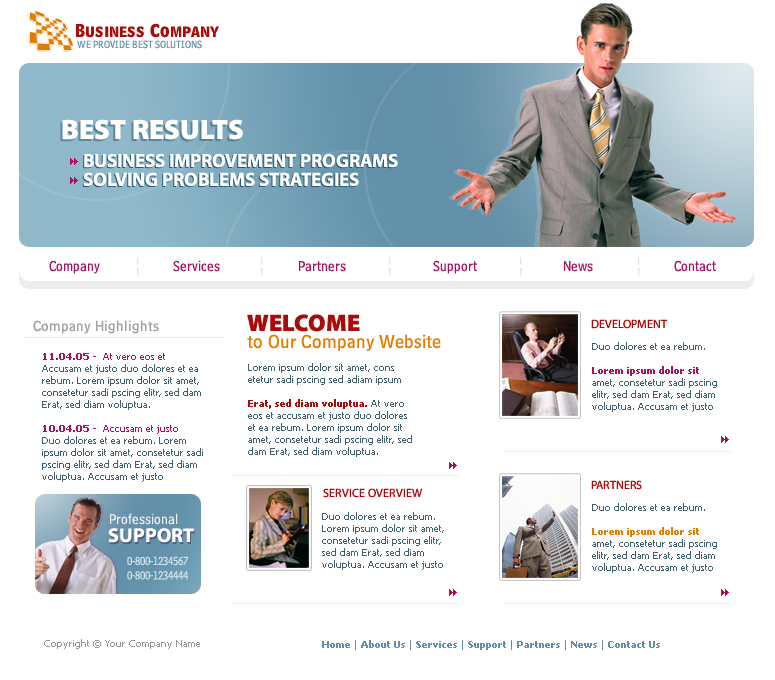
<style>
.page{position:relative;width:775px;height:680px;background:#ffffff}
.page>*{position:absolute;margin:0}
.t1{font:15px "BellCentennialBT-BoldListing";color:#a90b0a}
.t2{font:11px "BellCentennialBT-Address";color:#6290a8}
.t3{font:28px "MyriadPro-Black";color:#ffffff;text-transform:uppercase}
.t4{font:19px/18.8px "MyriadPro-Bold";color:#ffffff;text-transform:uppercase}
.t5{font:15px "BellCentennialBT-Address";color:#a61260}
.t6{font:19px/16.8px "BellCentennialBT-SubCaption";color:#e27c00}
.t7{font:24px/16.8px "MyriadPro-Black";color:#a90b0a;text-transform:uppercase}
.t8{font:15px "BellCentennialBT-SubCaption";color:#a1a1a1}
.t9{font:12px "MyriadPro-Regular";color:#a90b0a;text-transform:uppercase}
.t10{font:10px "Tahoma";color:#406070}
.t11{font:10px "Tahoma-Bold";color:#a61260}
.t12{font:10px "Tahoma";color:#a61260}
.t13{font:10px "Tahoma-Bold";color:#a90b0a}
.t14{font:10px "Tahoma-Bold";color:#e27c00}
.t15{font:15px "BellCentennialBT-Address";color:#ececec}
.t16{font:20px "MyriadPro-Bold";color:#ffffff;text-transform:uppercase}
.t17{font:12px "BellCentennialBT-Address";color:#d2e7f0}
.t18{font:10px "Tahoma";color:#949494}
.t19{font:10px "Tahoma-Bold";color:#6290a8}
.t20{font:10px "Tahoma";color:#6290a8}
</style>
<div class="page">
<p class="t1" style="left:76px;top:23px;width:143px;height:15px">Business Company</p>
<p class="t2" style="left:77px;top:40px;width:125px;height:9px">WE PROVIDE BEST SOLUTIONS</p>
<p class="t3" style="left:62px;top:119px;width:181px;height:21px">BEST RESULTS</p>
<p class="t4" style="left:83px;top:153px;width:315px;height:34px">BUSINESS IMPROVEMENT PROGRAMS<br>SOLVING PROBLEMS STRATEGIES</p>
<p class="t5" style="left:49px;top:260px;width:51px;height:14px">Company</p>
<p class="t5" style="left:173px;top:260px;width:47px;height:12px">Services</p>
<p class="t5" style="left:299px;top:261px;width:47px;height:11px">Partners</p>
<p class="t5" style="left:433px;top:260px;width:44px;height:14px">Support</p>
<p class="t5" style="left:564px;top:261px;width:29px;height:11px">News</p>
<p class="t5" style="left:674px;top:260px;width:42px;height:12px">Contact</p>
<p class="t6" style="left:247px;top:314px;width:194px;height:37px"><span class="t7">Welcome<br></span>to Our Company Website</p>
<p class="t8" style="left:33px;top:320px;width:126px;height:14px">Company Highlights</p>
<p class="t9" style="left:591px;top:319px;width:76px;height:10px">DEVELOPMENT</p>
<p class="t10" style="left:592px;top:342px;width:125px;height:70px">Duo dolores et ea rebum. <br><br><span class="t11">Lorem ipsum dolor sit</span> amet, consetetur sadi pscing elitr, sed dam Erat, sed diam voluptua. Accusam et justo</p>
<p class="t10" style="left:42px;top:353px;width:159px;height:57px"><span class="t11">11.04.05 -  </span><span class="t12">At vero eos et</span> <br>Accusam et justo duo dolores et ea rebum. Lorem ipsum dolor sit amet, consetetur sadi pscing elitr, sed dam Erat, sed diam voluptua.</p>
<p class="t10" style="left:248px;top:363px;width:164px;height:94px">Lorem ipsum dolor sit amet, cons etetur sadi pscing sed adiam ipsum <br><br><span class="t13">Erat, sed diam voluptua.</span> At vero eos et accusam et justo duo dolores et ea rebum. Lorem ipsum dolor sit amet, consetetur sadi pscing elitr, sed dam Erat, sed diam voluptua.</p>
<p class="t10" style="left:42px;top:425px;width:161px;height:57px"><span class="t11">10.04.05 -  </span><span class="t12">Accusam et justo<br></span>Duo dolores et ea rebum. Lorem ipsum dolor sit amet, consetetur sadi pscing elitr, sed dam Erat, sed diam voluptua. Accusam et justo</p>
<p class="t9" style="left:591px;top:480px;width:51px;height:10px">PARTNERS</p>
<p class="t9" style="left:323px;top:488px;width:100px;height:10px">Service overview</p>
<p class="t10" style="left:592px;top:503px;width:125px;height:70px">Duo dolores et ea rebum. <br><br><span class="t14">Lorem ipsum dolor sit </span>amet, consetetur sadi pscing elitr, sed dam Erat, sed diam voluptua. Accusam et justo</p>
<p class="t15" style="left:110px;top:513px;width:68px;height:12px">Professional</p>
<p class="t10" style="left:322px;top:512px;width:122px;height:58px">Duo dolores et ea rebum. Lorem ipsum dolor sit amet, consetetur sadi pscing elitr, sed dam Erat, sed diam voluptua. Accusam et justo</p>
<p class="t16" style="left:108px;top:528px;width:86px;height:15px">SUPPORT</p>
<p class="t17" style="left:127px;top:556px;width:62px;height:24px">0-800-1234567<br>0-800-1234444</p>
<p class="t18" style="left:44px;top:639px;width:156px;height:10px">Copyright © Your Company Name</p>
<p class="t19" style="left:322px;top:640px;width:338px;height:10px"><span class="t20">  </span>Home<span class="t20"> | </span>About Us <span class="t20">| </span>Services <span class="t20">| </span>Support <span class="t20">| </span>Partners <span class="t20">| </span>News<span class="t20"> | </span>Contact Us</p>
</div>
